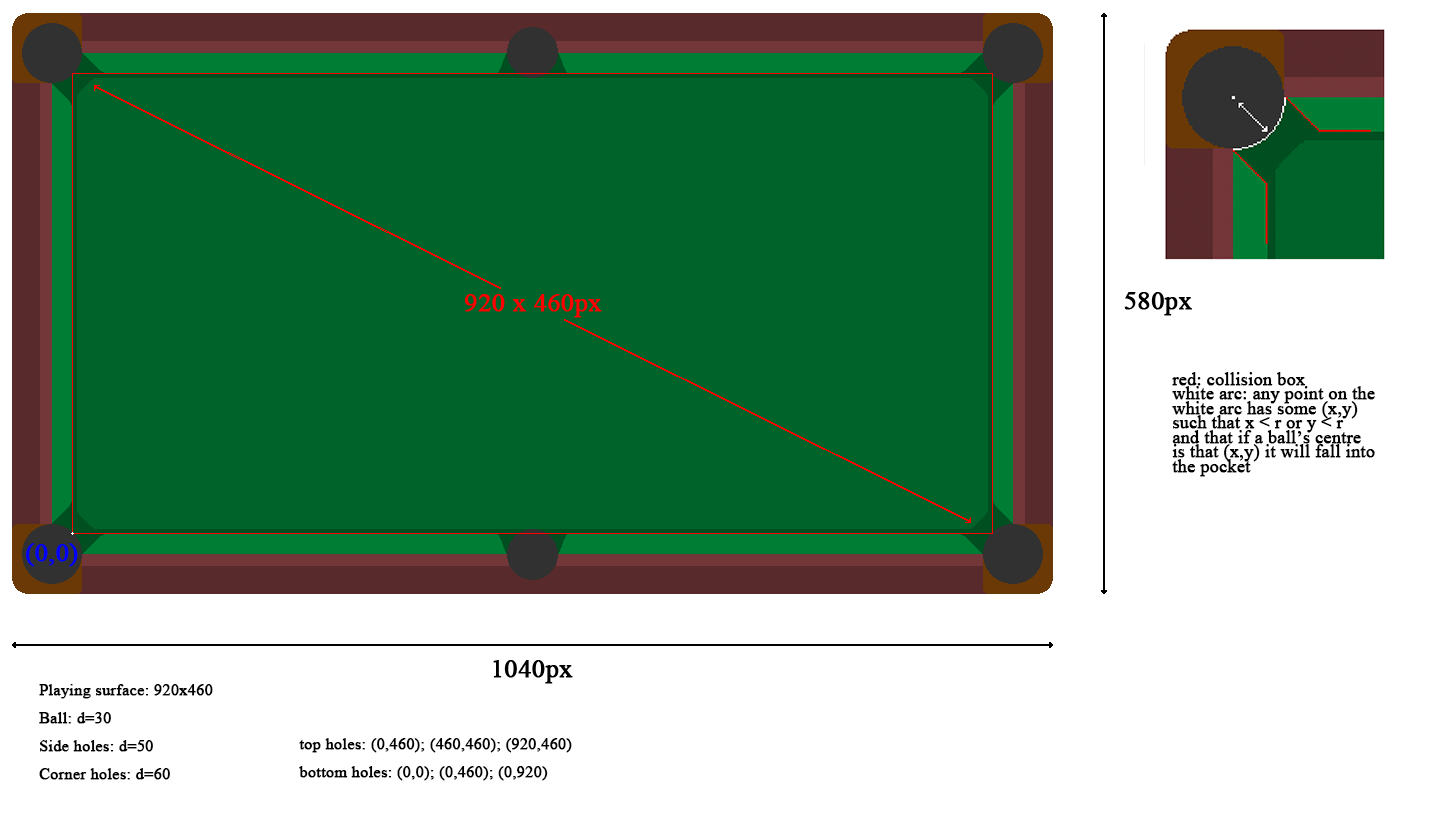
<style>
.page{position:relative;width:1441px;height:820px;background:#ffffff}
.page>*{position:absolute;margin:0}
.t1{font:17.9px/14.5px "TimesNewRomanPSMT";color:#000000;font-weight:bold}
.t2{font:16px "TimesNewRomanPSMT";color:#000000;font-weight:bold}
</style>
<div class="page">
<p class="t1" style="left:1172px;top:372px;width:203px;height:105px">red: collision box<br>white arc: any point on the <br>white arc has some (x,y) <br>such that x &lt; r or y &lt; r <br>and that if a ball’s centre<br>is that (x,y) it will fall into<br>the pocket</p>
<p class="t2" style="left:39px;top:684px;width:174px;height:96px">Playing surface: 920x460<br>Ball: d=30<br>Side holes: d=50<br>Corner holes: d=60</p>
<p class="t2" style="left:299px;top:738px;width:273px;height:43px">top holes: (0,460); (460,460); (920,460)<br>bottom holes: (0,0); (0,460); (0,920)</p>
</div>
